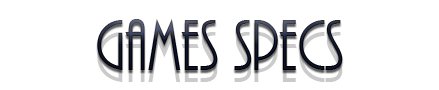
<style>
.page{position:relative;width:439px;height:90px;background:#ffffff}
.page>*{position:absolute;margin:0}
.t1{font:75px "ARBONNIE";color:#202d6e}
</style>
<div class="page">
<p class="t1" style="left:97px;top:19px;width:246px;height:51px">Games Specs</p>
</div>
